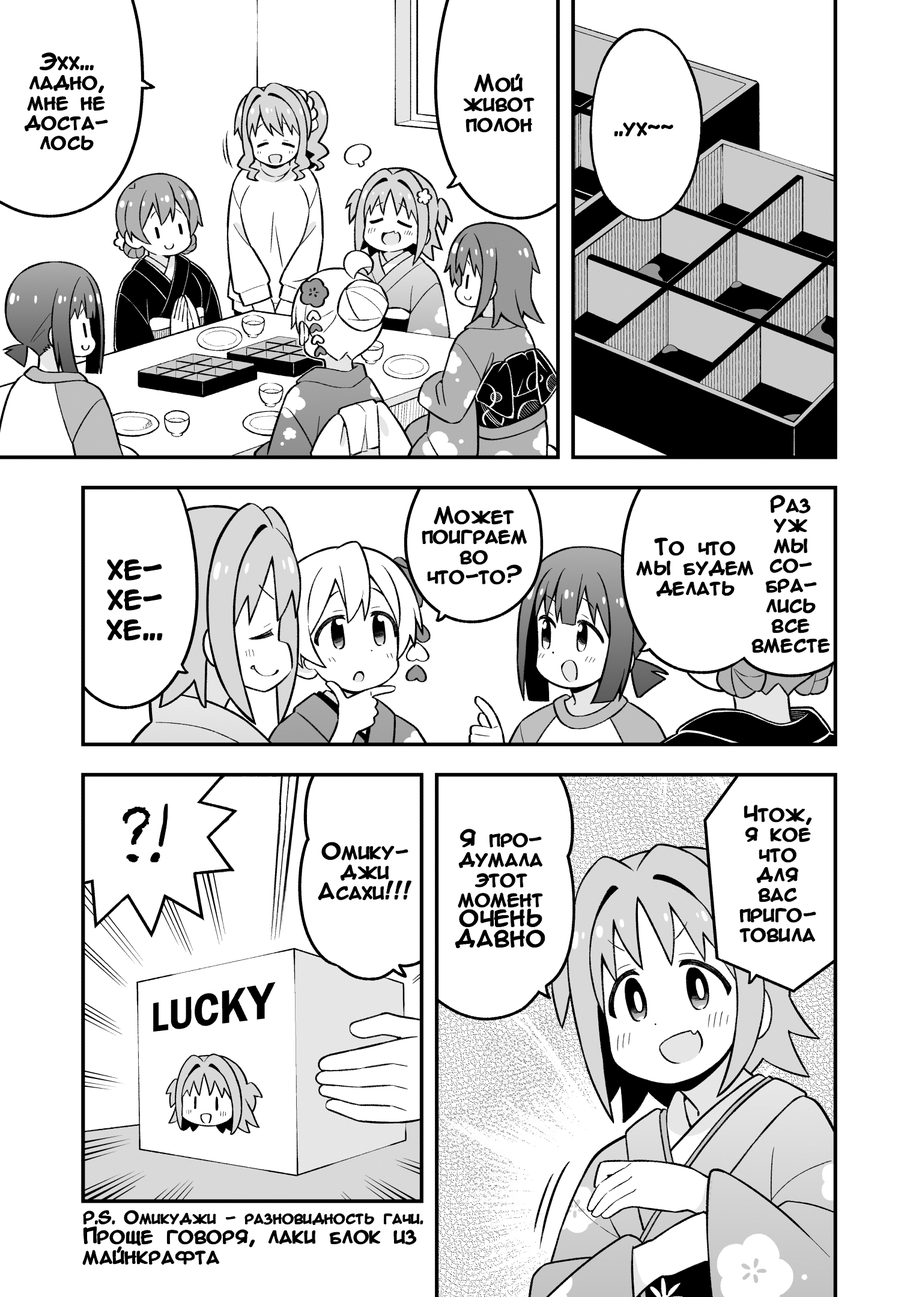
<style>
.page{position:relative;width:919px;height:1297px;background:#ffffff}
.page>*{position:absolute;margin:0}
.t1{font:20px/20px "AnimeAcev3";color:#000000;font-weight:bold}
.t2{font:20px "AnimeAcev3";color:#000000;font-weight:bold}
.t3{font:30px/30px "AnimeAcev3";color:#000000;font-weight:bold}
.t4{font:60.1px "LCChalk";color:#000000;font-weight:bold}
.t5{font:15px/20px "AnimeAcev3";color:#000000;font-weight:bold}
</style>
<div class="page">
<p class="t1" style="left:25px;top:53px;width:83px;height:97px;text-align:center">Эхх...<br>ладно,<br>мне не<br>доста-<br>лось</p>
<p class="t1" style="left:464px;top:74px;width:70px;height:58px;text-align:center">Мой<br>живот<br>полон</p>
<p class="t2" style="left:614px;top:123px;width:59px;height:13px">..ух~~</p>
<p class="t1" style="left:752px;top:496px;width:78px;height:157px;text-align:center">Раз<br>уж<br>мы<br>со-<br>бра-<br>лись<br>все<br>вместе</p>
<p class="t1" style="left:422px;top:506px;width:105px;height:78px;text-align:center">Может<br>поиграем<br>во<br>что-то?</p>
<p class="t1" style="left:637px;top:538px;width:116px;height:58px;text-align:center">То что<br>мы будем<br>делать</p>
<p class="t3" style="left:107px;top:560px;width:55px;height:80px;text-align:center">хе-<br>хе-<br>хе...</p>
<p class="t4" style="left:123px;top:804px;width:45px;height:59px">?!</p>
<p class="t1" style="left:740px;top:806px;width:76px;height:136px;text-align:center">Чтож,<br>я кое<br>что<br>для<br>вас<br>приго-<br>товила</p>
<p class="t1" style="left:455px;top:830px;width:90px;height:118px;text-align:center">Я про-<br>думала<br>этот<br>момент<br>ОЧЕНЬ<br>ДАВНО</p>
<p class="t1" style="left:318px;top:843px;width:93px;height:57px;text-align:center">Омику-<br>джи<br>Асахи!!!</p>
<p class="t1" style="left:83px;top:1211px;width:340px;height:54px"><span class="t5">P.S. Омикуджи - разновидность гачи.<br></span>Проще говоря, лаки блок из<br>майнкрафта</p>
</div>
